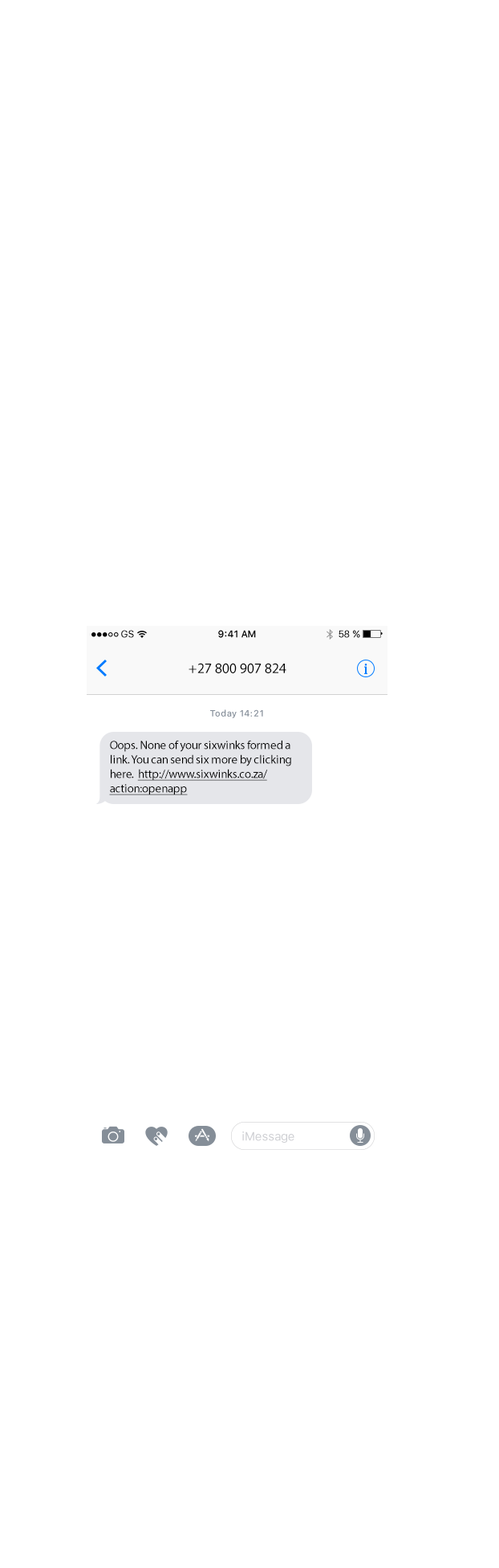
<style>
.page{position:relative;width:499px;height:1568px;background:#ffffff}
.page>*{position:absolute;margin:0}
.t1{font:9.6px "SFUIText-Regular"}
.t2{font:9.6px "SFUIText-Medium";color:#000000}
.t3{font:9.6px "SFUIText-Regular";color:#000000}
.t4{font:14.4px "MyriadPro-Regular";color:#000000}
.t5{font:8.8px "SFUIText-Medium";letter-spacing:0.035em;color:#858e99}
.t6{font:12px/14.4px "MyriadPro-Regular";letter-spacing:-0.016em;color:#000000}
.t7{font:12px/14.4px "MyriadPro-Regular";letter-spacing:-0.016em;color:#000000;text-decoration:underline}
.t8{font:12px "SFUIText-Regular";letter-spacing:-0.016em;color:#cdced2}
</style>
<div class="page">
<p class="t1" style="left:121px;top:630px;width:13px;height:8px">GS</p>
<p class="t2" style="left:218px;top:630px;width:38px;height:8px">9:41 AM</p>
<p class="t3" style="left:339px;top:630px;width:21px;height:8px">58 %</p>
<p class="t4" style="left:189px;top:663px;width:97px;height:10px">+27 800 907 824</p>
<p class="t5" style="left:210px;top:709px;width:53px;height:9px">Today 14:21</p>
<p class="t6" style="left:109px;top:740px;width:182px;height:55px">Oops. None of your sixwinks formed a <br>link. You can send six more by clicking <br>here.  <span class="t7">http://www.sixwinks.co.za/<br>action:openapp</span></p>
<p class="t8" style="left:242px;top:1131px;width:53px;height:12px">iMessage</p>
</div>
